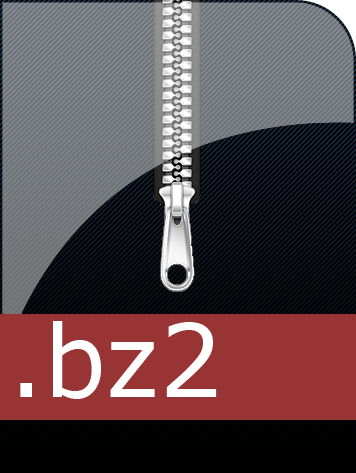
<style>
.page{position:relative;width:356px;height:473px;background:#993434}
.page>*{position:absolute;margin:0}
.t1{font:100px "Verdana";color:#ffffff}
</style>
<div class="page">
<p class="t1" style="left:20px;top:321px;width:197px;height:78px">.bz2</p>
</div>
